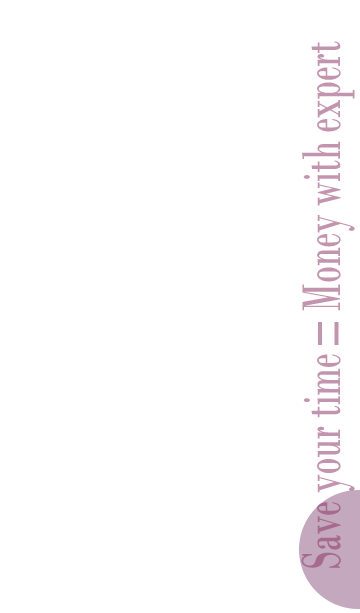
<style>
.page{position:relative;width:360px;height:613px;background:#ffffff}
.page>*{position:absolute;margin:0}
.t1{font:56.9px "BodoniMT";color:#c394ad;scale:0.6 1}
.t2{font:72px "BodoniMT";color:#c394ad;scale:0.6 1}
</style>
<div class="page">
<p class="t1" style="left:301px;top:41px;width:54px;height:527px;rotate:-90deg">Save your time     Money with expert</p>
<p class="t2" style="left:318px;top:322px;width:21px;height:23px;rotate:-90deg">=</p>
</div>
